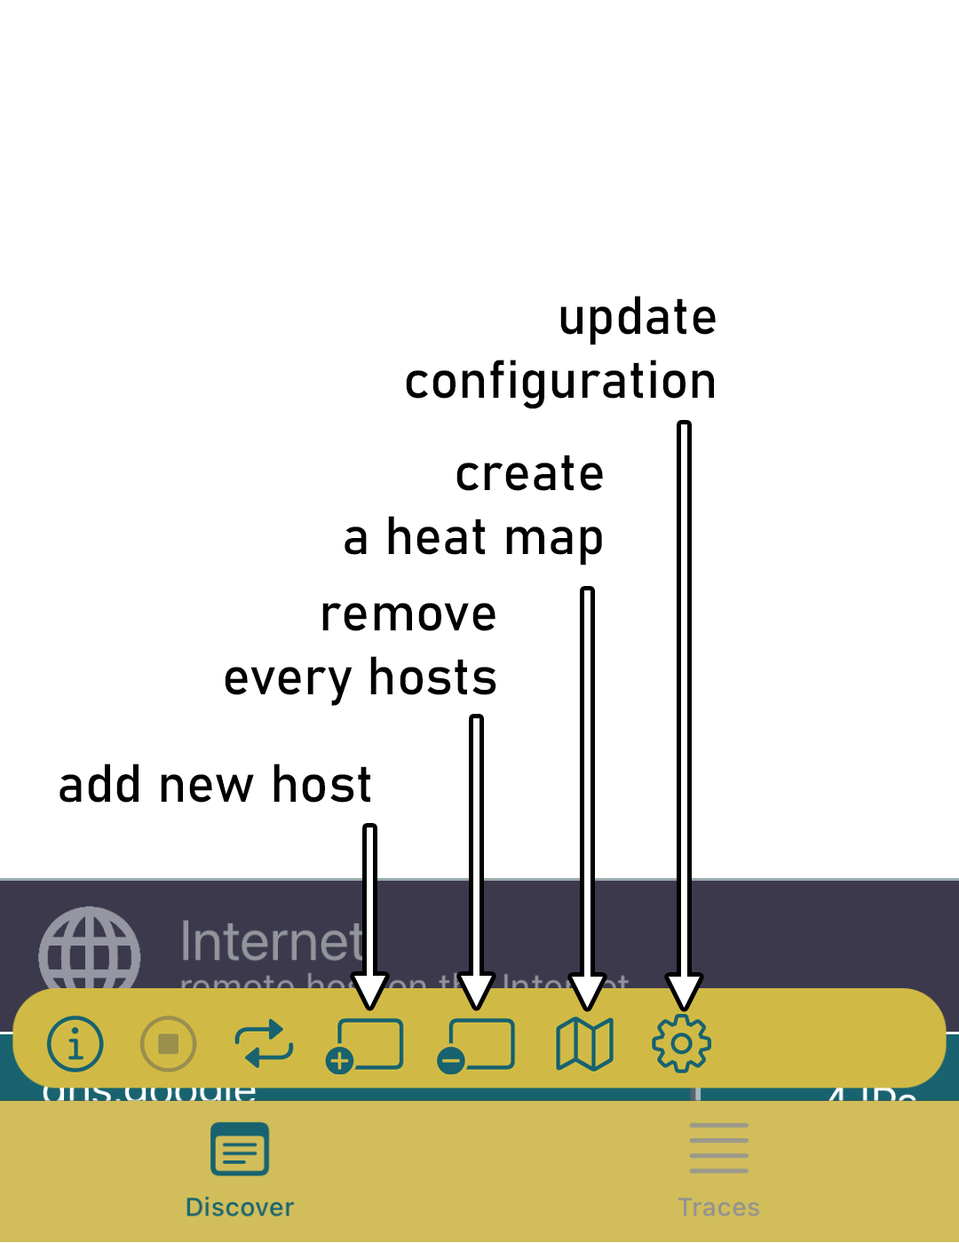
<style>
.page{position:relative;width:959px;height:1243px;background:#ffffff}
.page>*{position:absolute;margin:0}
.t1{font:53.3px "Bahnschrift";color:#000000}
</style>
<div class="page">
<p class="t1" style="left:406px;top:296px;width:310px;height:113px;text-align:right">update<br>configuration</p>
<p class="t1" style="left:345px;top:455px;width:258px;height:111px;text-align:right">create<br>a heat map</p>
<p class="t1" style="left:225px;top:603px;width:271px;height:103px;text-align:right">remove<br>every hosts</p>
<p class="t1" style="left:59px;top:764px;width:311px;height:39px">add new host</p>
</div>
